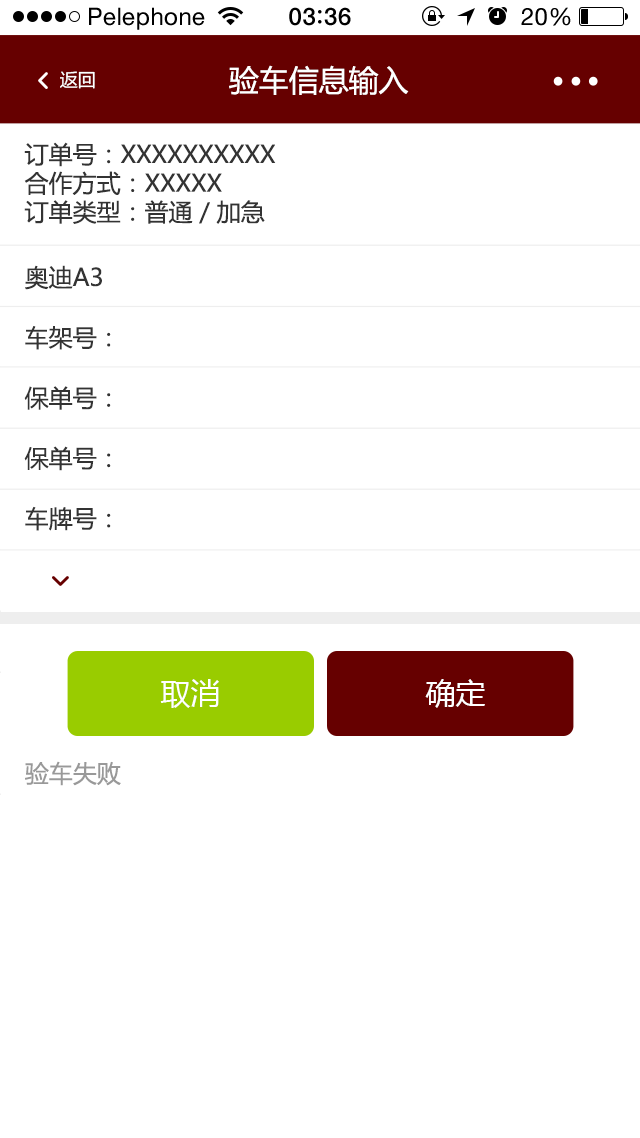
<style>
.page{position:relative;width:640px;height:1138px;background:#ffffff}
.page>*{position:absolute;margin:0}
.t1{font:24px "HelveticaNeue";letter-spacing:0.02em;color:#000000}
.t2{font:24px "HelveticaNeue-Medium";letter-spacing:0.03em;color:#000000}
.t3{font:29.9px "MicrosoftYaHei";color:#ffffff}
.t4{font:18px "MicrosoftYaHei";color:#ffffff}
.t5{font:24px "MicrosoftYaHei";color:#333333}
.t6{font:24px/60.3px "MicrosoftYaHei";color:#333333}
.t7{font:30px "MicrosoftYaHei";color:#ffffff}
.t8{font:24px "MicrosoftYaHei";color:#999999}
</style>
<div class="page">
<p class="t1" style="left:89px;top:7px;width:116px;height:23px">Pelephone</p>
<p class="t2" style="left:289px;top:7px;width:62px;height:19px">03 36</p>
<p class="t1" style="left:521px;top:7px;width:50px;height:19px">20%</p>
<p class="t3" style="left:229px;top:65px;width:180px;height:30px">验车信息输入</p>
<p class="t4" style="left:60px;top:71px;width:35px;height:18px">返回</p>
<p class="t5" style="left:24px;top:142px;width:252px;height:82px">订单号：XXXXXXXXXX<br>合作方式：XXXXX<br>订单类型：普通／加急</p>
<p class="t6" style="left:24px;top:265px;width:87px;height:266px">奥迪A3<br>车架号：<br>保单号：<br>保单号：<br>车牌号：</p>
<p class="t7" style="left:160px;top:679px;width:59px;height:29px">取消</p>
<p class="t7" style="left:425px;top:679px;width:60px;height:29px">确定</p>
<p class="t8" style="left:25px;top:761px;width:96px;height:25px">验车失败</p>
</div>
